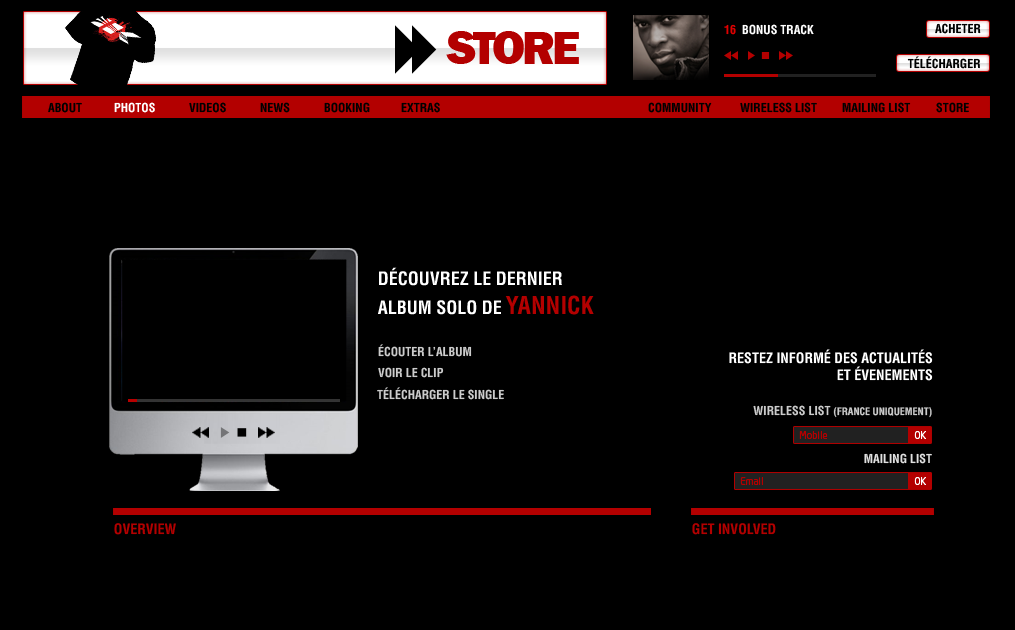
<style>
.page{position:relative;width:1015px;height:630px;background:#000000}
.page>*{position:absolute;margin:0}
.t1{font:12px "Helvetica-CondensedBold";color:#ffffff}
.t2{font:12px "Helvetica-CondensedBold";color:#df0000}
.t3{font:12px "Helvetica-CondensedBold";color:#000000}
.t4{font:48.4px "FranklinGothic-Heavy";letter-spacing:-0.075em;color:#b30000}
.t5{font:18px "Helvetica-CondensedBold";color:#ffffff}
.t6{font:24px "Helvetica-CondensedBold";color:#b30000}
.t7{font:12px "Helvetica-CondensedBold";color:#cccccc}
.t8{font:14px "Helvetica-CondensedBold";color:#ffffff}
.t9{font:10px "Helvetica-CondensedBold";color:#cccccc}
.t10{font:10px "NeoTechDacia-Regular";color:#b30000}
.t11{font:10px "NeoTechDacia-Regular";color:#ffffff}
.t12{font:12px "Helvetica-CondensedBold";color:#e0e0e0}
.t13{font:14px "Helvetica-CondensedBold";color:#b30000}
</style>
<div class="page">
<p class="t1" style="left:724px;top:24px;width:90px;height:11px"><span class="t2">16</span>  BONUS TRACK</p>
<p class="t3" style="left:935px;top:23px;width:46px;height:11px">ACHETER</p>
<p class="t4" style="left:446px;top:31px;width:133px;height:33px">STORE</p>
<p class="t3" style="left:907px;top:56px;width:73px;height:13px">TÉLÉCHARGER</p>
<p class="t3" style="left:48px;top:102px;width:34px;height:11px">ABOUT</p>
<p class="t1" style="left:114px;top:102px;width:41px;height:11px">PHOTOS</p>
<p class="t3" style="left:189px;top:102px;width:37px;height:11px">VIDEOS</p>
<p class="t3" style="left:260px;top:102px;width:30px;height:11px">NEWS</p>
<p class="t3" style="left:324px;top:102px;width:46px;height:11px">BOOKING</p>
<p class="t3" style="left:401px;top:102px;width:39px;height:11px">EXTRAS</p>
<p class="t3" style="left:648px;top:102px;width:64px;height:11px">COMMUNITY</p>
<p class="t3" style="left:740px;top:102px;width:77px;height:11px">WIRELESS LIST</p>
<p class="t3" style="left:842px;top:102px;width:69px;height:11px">MAILING LIST</p>
<p class="t3" style="left:936px;top:102px;width:33px;height:11px">STORE</p>
<p class="t5" style="left:378px;top:267px;width:216px;height:48px">DÉCOUVREZ LE DERNIER<br>ALBUM SOLO DE <span class="t6">YANNICK</span></p>
<p class="t7" style="left:378px;top:344px;width:94px;height:13px">ÉCOUTER L’ALBUM</p>
<p class="t8" style="left:729px;top:349px;width:204px;height:32px;text-align:right">RESTEZ INFORMÉ DES ACTUALITÉS<br>ET ÉVENEMENTS</p>
<p class="t7" style="left:378px;top:367px;width:66px;height:11px">VOIR LE CLIP</p>
<p class="t7" style="left:377px;top:387px;width:127px;height:13px">TÉLÉCHARGER LE SINGLE</p>
<p class="t9" style="left:753px;top:405px;width:179px;height:13px"><span class="t7">WIRELESS LIST </span>(FRANCE UNIQUEMENT)</p>
<p class="t10" style="left:799px;top:431px;width:29px;height:8px">Mobile</p>
<p class="t11" style="left:914px;top:431px;width:12px;height:8px">OK</p>
<p class="t12" style="left:864px;top:453px;width:68px;height:11px">MAILING LIST</p>
<p class="t10" style="left:740px;top:477px;width:23px;height:8px">Email</p>
<p class="t11" style="left:914px;top:477px;width:12px;height:8px">OK</p>
<p class="t13" style="left:114px;top:523px;width:62px;height:12px">OVERVIEW</p>
<p class="t13" style="left:692px;top:523px;width:84px;height:12px">GET INVOLVED</p>
</div>
